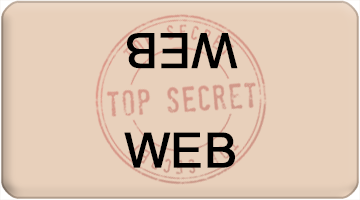
<style>
.page{position:relative;width:360px;height:200px;background:#e8d0bb}
.page>*{position:absolute;margin:0}
.t1{font:48px "ArialMT";color:#000000;font-weight:bold}
</style>
<div class="page">
<p class="t1" style="left:127px;top:33px;width:111px;height:36px;rotate:180deg">WEB</p>
<p class="t1" style="left:124px;top:132px;width:111px;height:36px">WEB</p>
</div>
